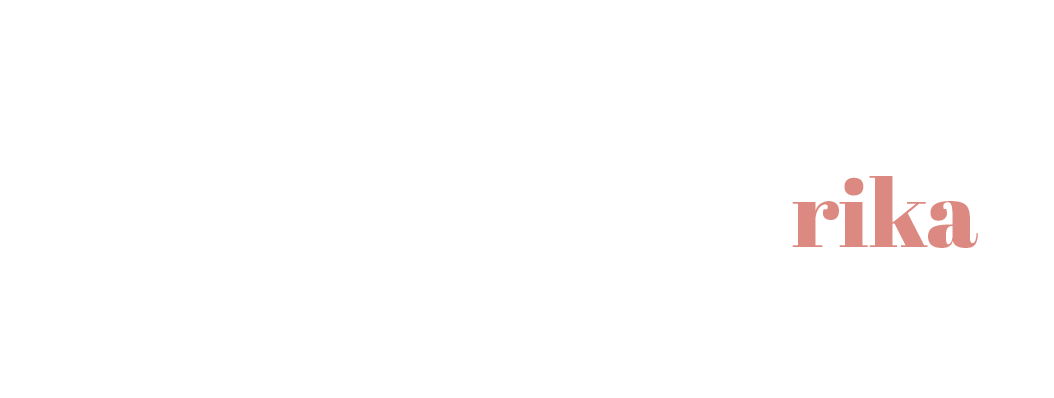
<style>
.page{position:relative;width:1054px;height:398px;background:#ffffff}
.page>*{position:absolute;margin:0}
.t1{font:94.9px "AbrilFatface-Regular";color:#db8981}
</style>
<div class="page">
<p class="t1" style="left:792px;top:176px;width:186px;height:72px">rika</p>
</div>
